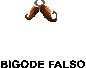
<style>
.page{position:relative;width:86px;height:68px;background:#ffffff}
.page>*{position:absolute;margin:0}
.t1{font:10.3px "Arial-BoldMT";color:#000000;scale:1.11 1}
</style>
<div class="page">
<p class="t1" style="left:0px;top:60px;width:85px;height:9px">BIGODE FALSO</p>
</div>
